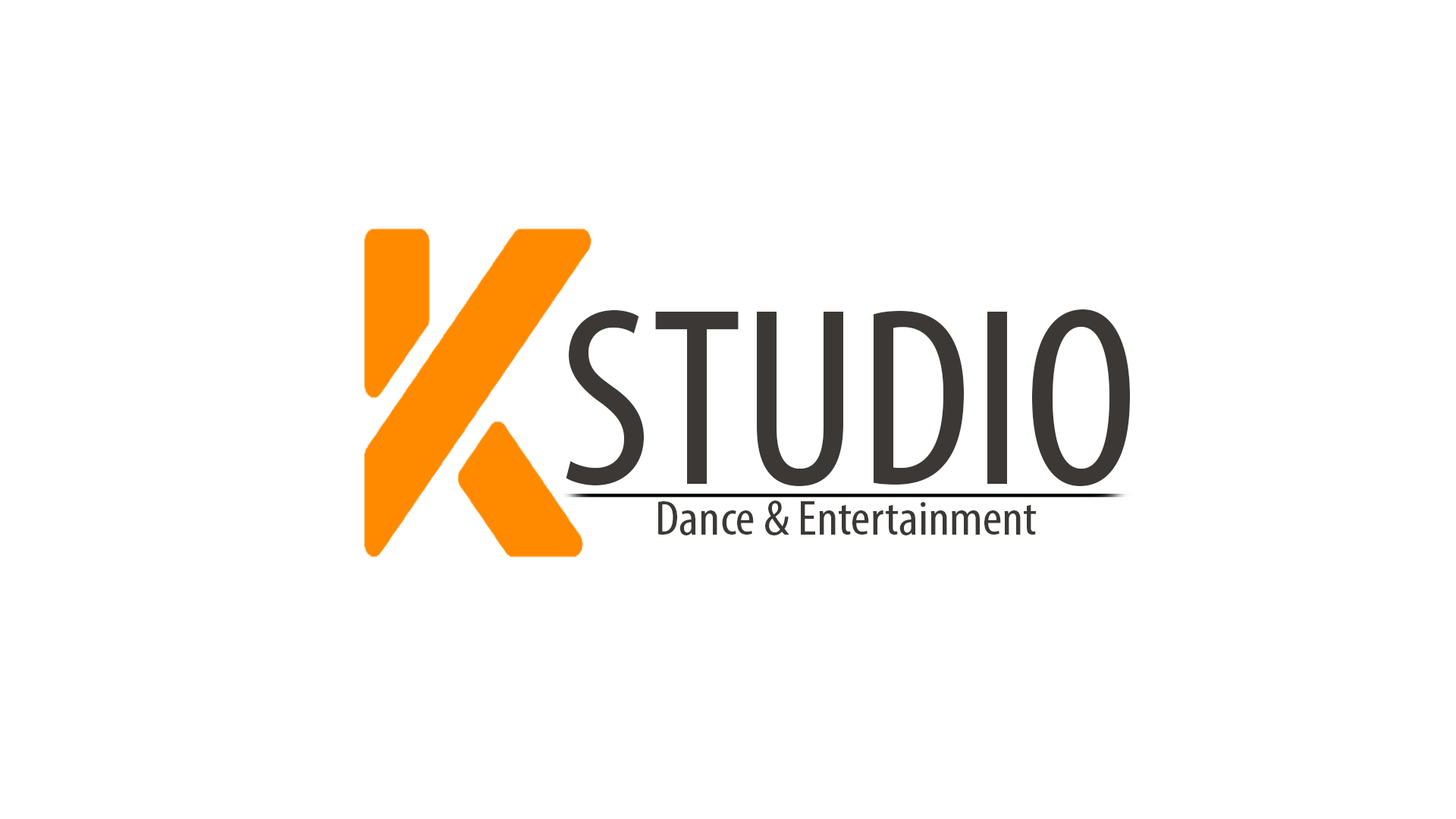
<style>
.page{position:relative;width:1456px;height:819px;background:#ffffff}
.page>*{position:absolute;margin:0}
.t1{font:255.9px "MyriadPro-Cond";color:#3b3835}
.t2{font:49.2px "MyriadPro-Cond";color:#3b3835;scale:1.08 1}
</style>
<div class="page">
<p class="t1" style="left:566px;top:309px;width:564px;height:177px">STUDIO</p>
<p class="t2" style="left:658px;top:500px;width:378px;height:35px">Dance &amp; Entertainment</p>
</div>
